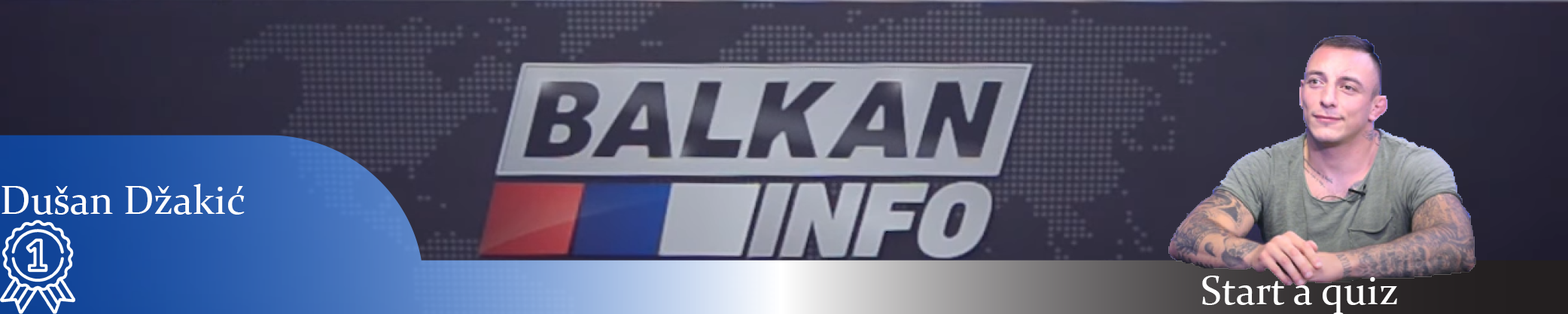
<style>
.page{position:relative;width:1568px;height:314px}
.page>*{position:absolute;margin:0}
.t1{font:40.8px "Constantia";color:#ffffff}
</style>
<div class="page">
<p class="t1" style="left:2px;top:184px;width:243px;height:31px">Dušan Džakić</p>
<p class="t1" style="left:1202px;top:276px;width:195px;height:38px">Start a quiz</p>
</div>
